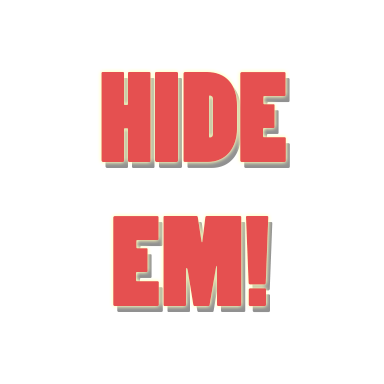
<style>
.page{position:relative;width:384px;height:384px;background:#ffffff}
.page>*{position:absolute;margin:0}
.t1{font:120px "PoplarStd";color:#e55050}
</style>
<div class="page">
<p class="t1" style="left:101px;top:72px;width:185px;height:235px">HIDE<br> EM!</p>
</div>
